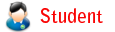
<style>
.page{position:relative;width:115px;height:32px;background:#ffffff}
.page>*{position:absolute;margin:0}
.t1{font:19px "BellGothicStd-Bold";color:#f90404}
</style>
<div class="page">
<p class="t1" style="left:40px;top:8px;width:63px;height:15px">Student</p>
</div>
